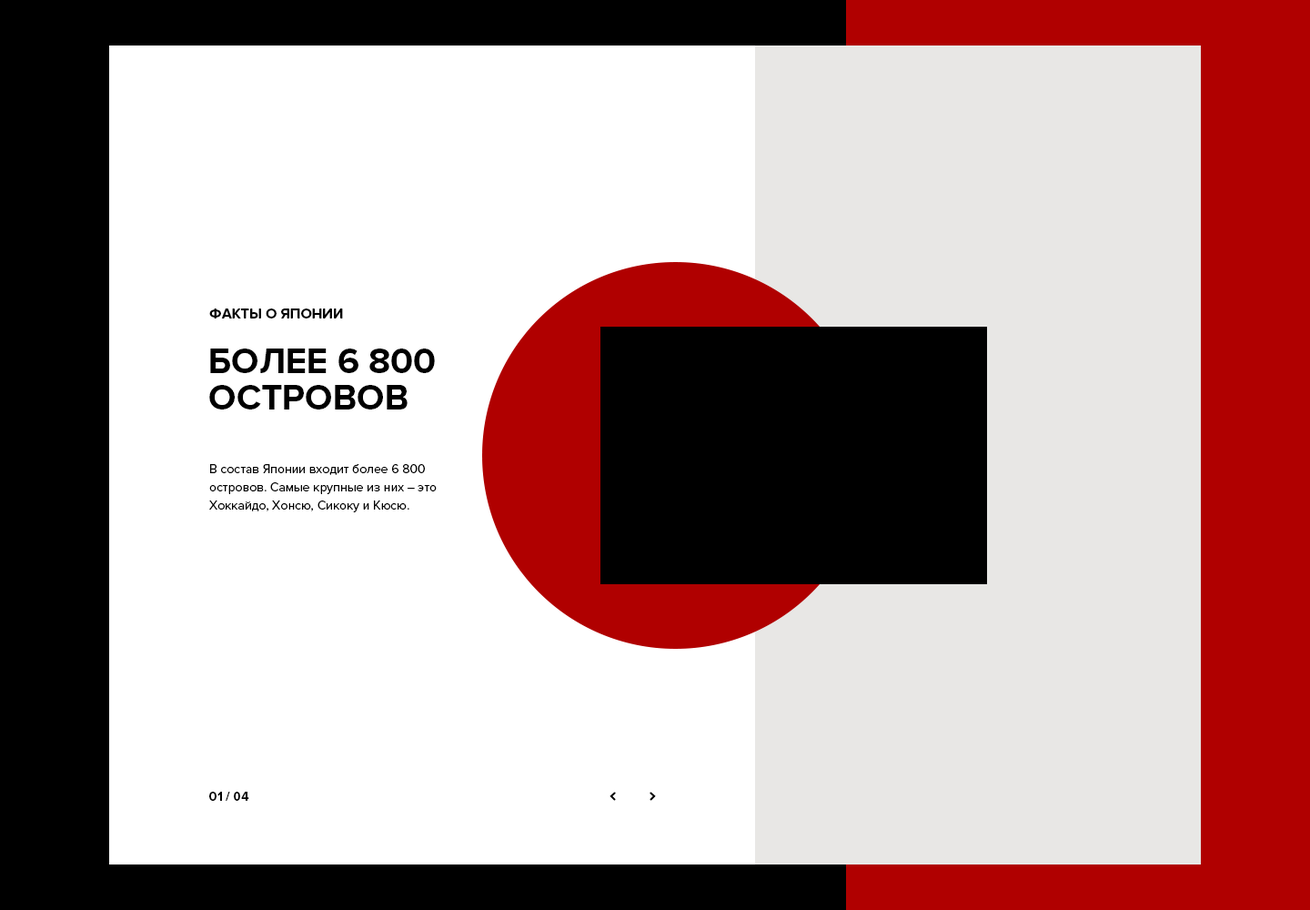
<style>
.page{position:relative;width:1310px;height:910px;background:#ffffff}
.page>*{position:absolute;margin:0}
.t1{font:14.6px "ProximaNova-Bold";color:#000000;text-transform:uppercase}
.t2{font:36.4px/36.4px "ProximaNova-Bold";color:#000000;text-transform:uppercase}
.t3{font:12.7px/18.2px "ProximaNova-Regular";color:#000000}
.t4{font:12.7px "ProximaNova-Bold";color:#000000;text-transform:uppercase}
</style>
<div class="page">
<p class="t1" style="left:209px;top:308px;width:134px;height:10px">Факты о Японии</p>
<p class="t2" style="left:209px;top:349px;width:226px;height:60px">более 6 800<br>островов</p>
<p class="t3" style="left:209px;top:464px;width:228px;height:48px">В состав Японии входит более 6 800 островов. Самые крупные из них – это Хоккайдо, Хонсю, Сикоку и Кюсю.</p>
<p class="t4" style="left:209px;top:792px;width:40px;height:9px">01 / 04</p>
</div>
